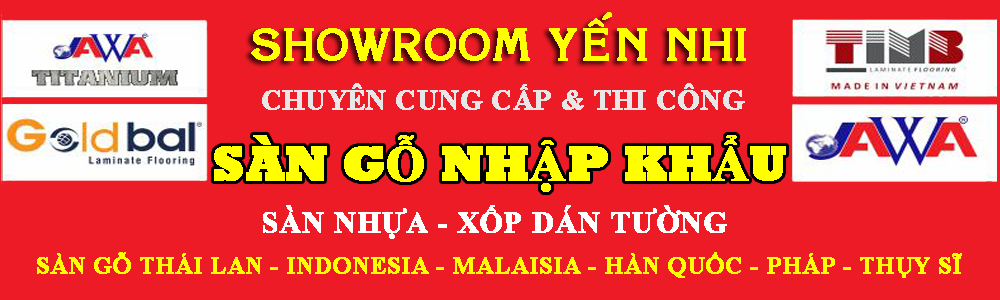
<style>
.page{position:relative;width:1000px;height:300px;background:#ed1b25}
.page>*{position:absolute;margin:0}
.t1{font:44px "VNI-Korin-Bold";color:#ffff00;font-weight:bold}
.t2{font:28px "TimesNewRomanPS-BoldMT";color:#e7e7e7;font-weight:bold}
.t3{font:50px "Rockwell-ExtraBold";color:#ffff00;font-weight:bold}
.t4{font:50px "TimesNewRomanPS-BoldMT";color:#ffff00;font-weight:bold}
.t5{font:30px "TimesNewRomanPS-BoldMT";color:#fffffd;font-weight:bold}
.t6{font:24px "TimesNewRomanPS-BoldMT";color:#ffff00;font-weight:bold}
</style>
<div class="page">
<p class="t1" style="left:251px;top:12px;width:495px;height:49px">SHOWROOM YEÁN NHI</p>
<p class="t2" style="left:262px;top:83px;width:483px;height:27px">CHUYÊN CUNG CẤP &amp; THI CÔNG</p>
<p class="t3" style="left:214px;top:135px;width:572px;height:57px">SÀN G<span class="t4">Ỗ</span> NH<span class="t4">Ậ</span>P KH<span class="t4">Ẩ</span>U</p>
<p class="t5" style="left:263px;top:205px;width:464px;height:34px">SÀN NHỰA - XỐP DÁN TƯỜNG</p>
<p class="t6" style="left:37px;top:252px;width:925px;height:26px">SÀN GỖ THÁI LAN - INDONESIA - MALAISIA - HÀN QUỐC - PHÁP - THỤY SĨ</p>
</div>
